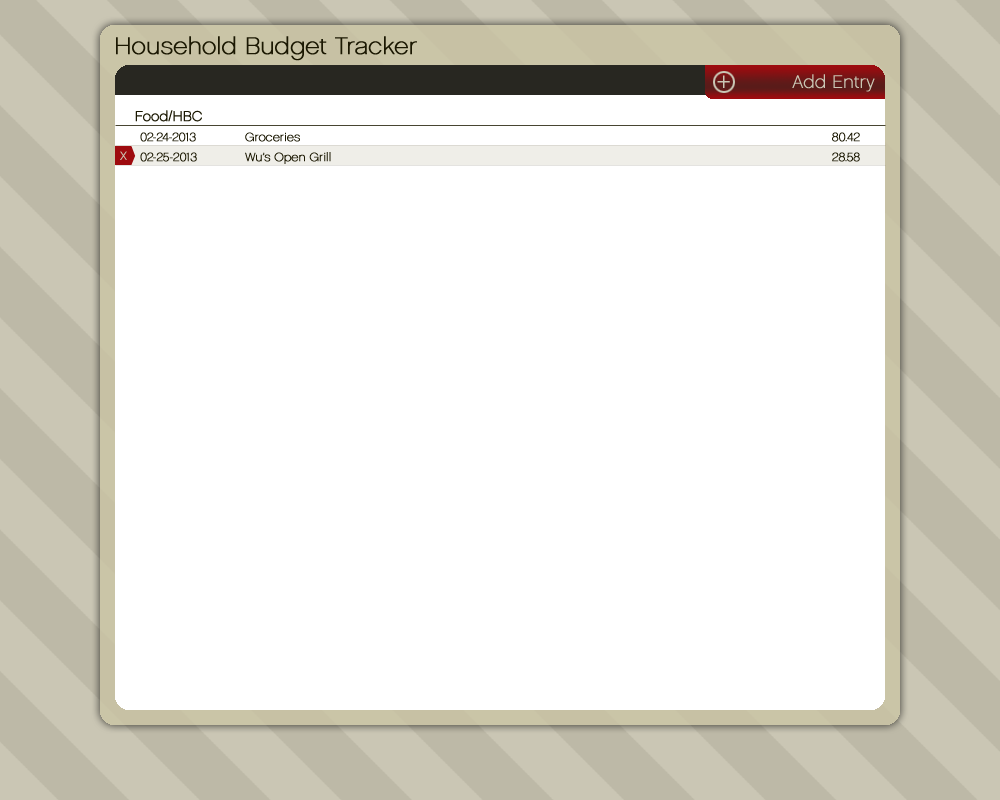
<style>
.page{position:relative;width:1000px;height:800px;background:#ffffff}
.page>*{position:absolute;margin:0}
.t1{font:24px "Chalet-ParisNineteenSixty";color:#1b1802;font-weight:bold}
.t2{font:30px "Chalet-ParisNineteenSixty";color:#cac6b4;font-weight:bold}
.t3{font:18px "Chalet-ParisNineteenSixty";color:#cac6b4;font-weight:bold}
.t4{font:14px "Chalet-ParisNineteenSixty";color:#1b1802;font-weight:bold}
.t5{font:12px "Chalet-ParisNineteenSixty";color:#1b1802;font-weight:bold}
.t6{font:12px "Chalet-ParisNineteenSixty";color:#cac6b4;font-weight:bold}
</style>
<div class="page">
<p class="t1" style="left:116px;top:36px;width:301px;height:25px">Household Budget Tracker</p>
<p class="t2" style="left:717px;top:75px;width:13px;height:13px">+</p>
<p class="t3" style="left:792px;top:74px;width:83px;height:18px">Add Entry</p>
<p class="t4" style="left:135px;top:110px;width:67px;height:12px">Food/HBC</p>
<p class="t5" style="left:140px;top:132px;width:56px;height:10px">02-24-2013</p>
<p class="t5" style="left:245px;top:132px;width:55px;height:10px">Groceries</p>
<p class="t5" style="left:832px;top:132px;width:28px;height:10px">80.42</p>
<p class="t6" style="left:120px;top:151px;width:7px;height:9px">X</p>
<p class="t5" style="left:140px;top:152px;width:57px;height:10px">02-25-2013</p>
<p class="t5" style="left:245px;top:152px;width:86px;height:12px">Wu’s Open Grill</p>
<p class="t5" style="left:832px;top:152px;width:28px;height:10px">28.58</p>
</div>
